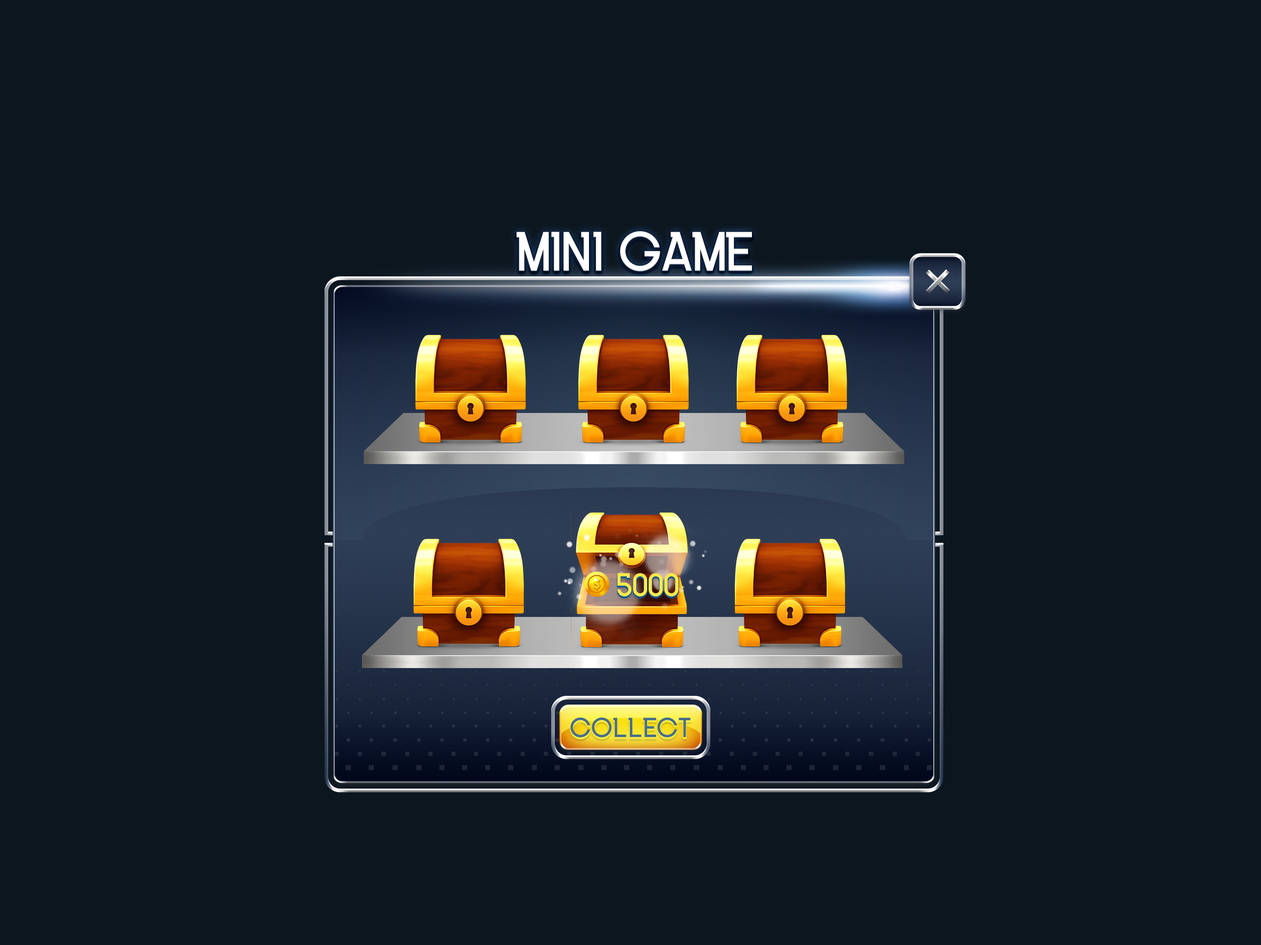
<style>
.page{position:relative;width:1261px;height:945px;background:#0c161f}
.page>*{position:absolute;margin:0}
.t1{font:55.4px "INKFERNO";letter-spacing:-0.025em;color:#ffffff;text-transform:uppercase}
.t2{font:33.2px "INKFERNO";color:#fbe94a;text-transform:uppercase}
.t3{font:27.7px "INKFERNO";color:#476f8b;text-transform:uppercase}
</style>
<div class="page">
<p class="t1" style="left:517px;top:231px;width:235px;height:40px">Mini Game</p>
<p class="t2" style="left:617px;top:573px;width:62px;height:24px">5000</p>
<p class="t3" style="left:571px;top:718px;width:120px;height:20px">collect</p>
</div>
